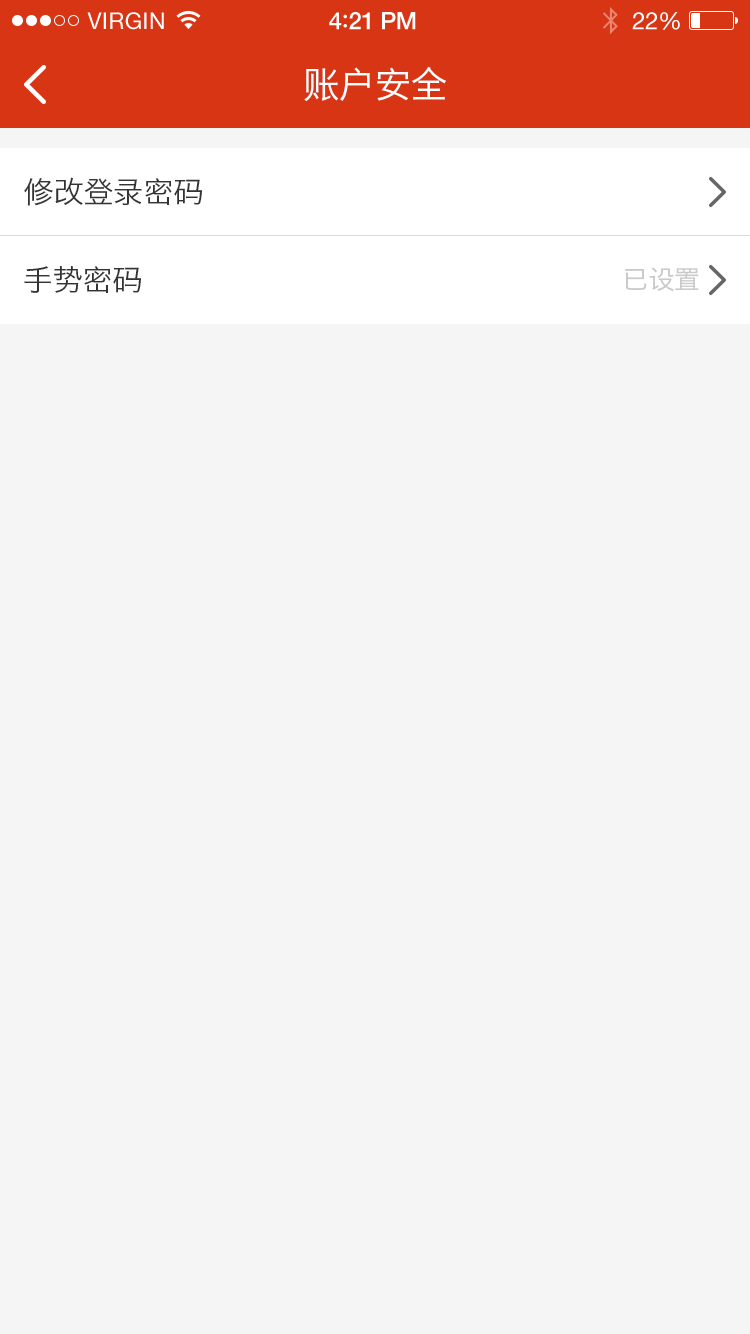
<style>
.page{position:relative;width:750px;height:1334px;background:#f5f5f5}
.page>*{position:absolute;margin:0}
.t1{font:23px "HelveticaNeue";letter-spacing:0.02em;color:#ffffff}
.t2{font:24px "HelveticaNeue-Medium";letter-spacing:-0.02em;color:#ffffff}
.t3{font:26px "Avenir-Medium";letter-spacing:-0.02em;color:#ffffff}
.t4{font:24px "HelveticaNeue";letter-spacing:-0.02em;color:#ffffff}
.t5{font:36px "HiraginoSansGB-W3";color:#ffffff}
.t6{font:30px "HiraginoSansGB-W3";color:#333333}
.t7{font:26px "HiraginoSansGB-W3";color:#cacaca}
</style>
<div class="page">
<p class="t1" style="left:87px;top:12px;width:77px;height:18px">VIRGIN</p>
<p class="t2" style="left:329px;top:12px;width:87px;height:18px">4<span class="t3">:</span>21 PM</p>
<p class="t4" style="left:632px;top:12px;width:48px;height:18px">22%</p>
<p class="t5" style="left:304px;top:66px;width:142px;height:35px">账户安全</p>
<p class="t6" style="left:24px;top:177px;width:178px;height:29px">修改登录密码</p>
<p class="t6" style="left:24px;top:265px;width:117px;height:28px">手势密码</p>
<p class="t7" style="left:625px;top:267px;width:74px;height:24px">已设置</p>
</div>
